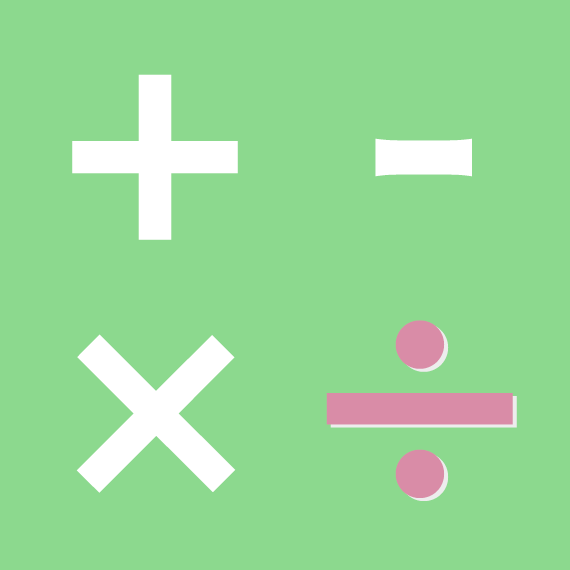
<style>
.page{position:relative;width:570px;height:570px;background:#8cd98e}
.page>*{position:absolute;margin:0}
.t1{font:280px "HiraginoSansGB-W6";color:#ffffff}
.t2{font:260px "HiraginoSansGB-W6";color:#d98ca7}
.t3{font:260px "HiraginoSansGB-W6";color:#ffffff}
</style>
<div class="page">
<p class="t1" style="left:72px;top:74px;width:166px;height:166px">+</p>
<p class="t1" style="left:375px;top:138px;width:97px;height:39px">-</p>
<p class="t2" style="left:326px;top:320px;width:187px;height:178px">÷</p>
<p class="t2" style="left:330px;top:323px;width:187px;height:178px">÷</p>
<p class="t3" style="left:76px;top:334px;width:160px;height:159px">×</p>
</div>
